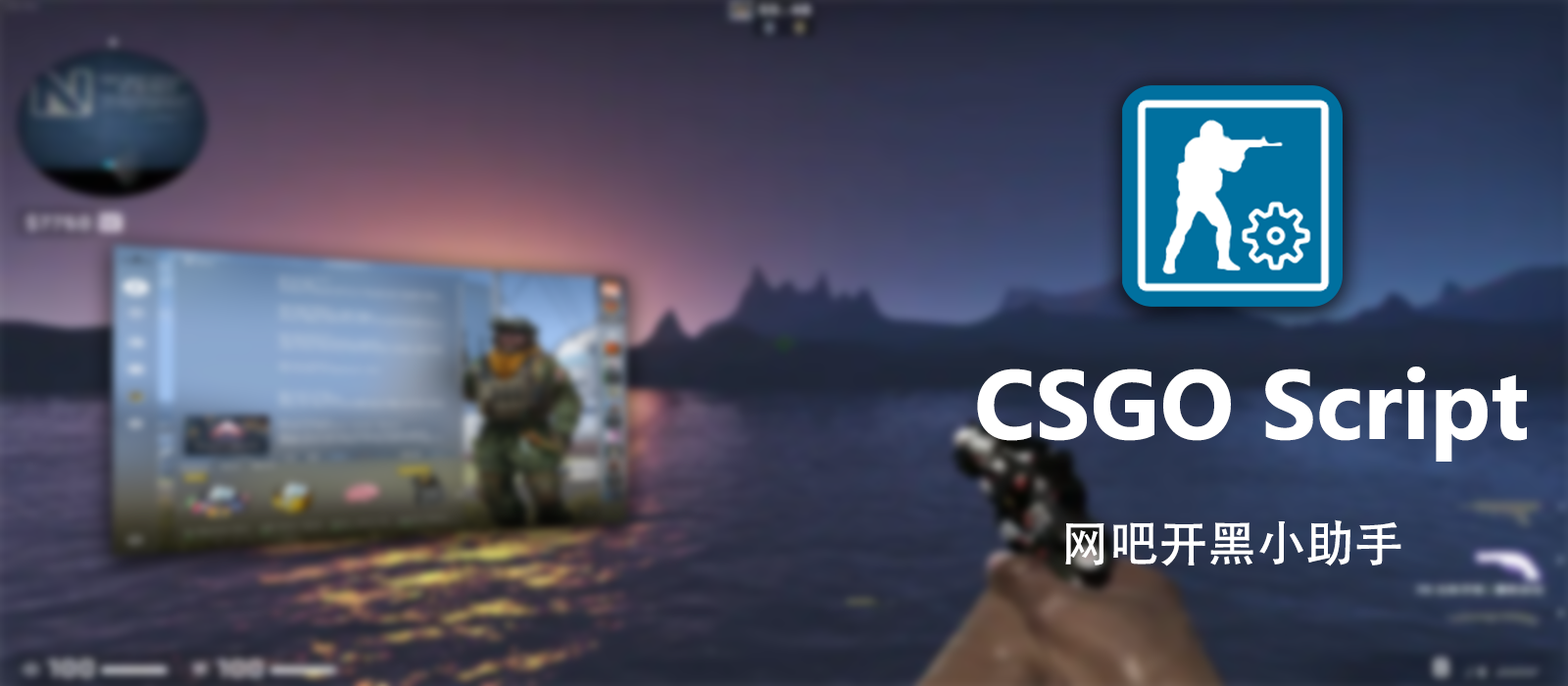
<style>
.page{position:relative;width:1568px;height:686px}
.page>*{position:absolute;margin:0}
.t1{font:98px "SegoeUI-Bold";color:#ffffff}
.t2{font:49px "AdobeHeitiStd-Regular";color:#ffffff}
</style>
<div class="page">
<p class="t1" style="left:977px;top:367px;width:550px;height:95px">CSGO Script</p>
<p class="t2" style="left:1065px;top:519px;width:336px;height:47px">网吧开黑小助手</p>
</div>
